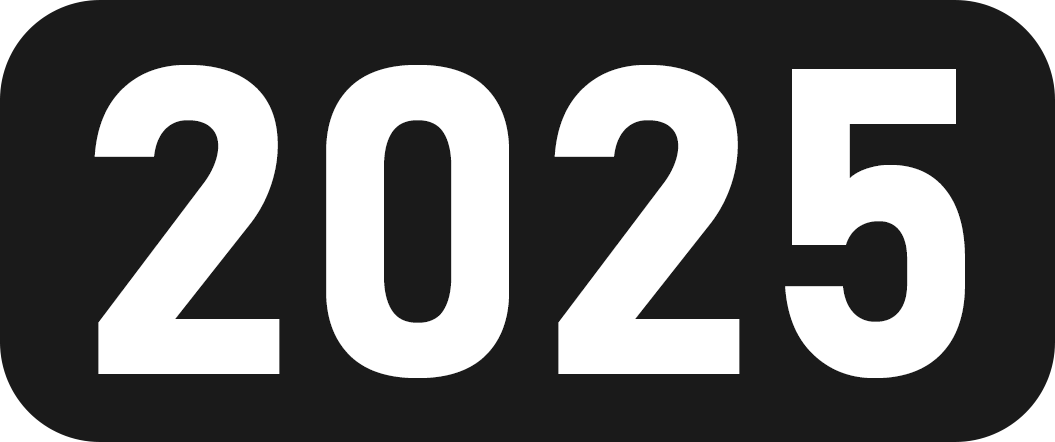
<style>
.page{position:relative;width:1055px;height:442px;background:#1a1a1a}
.page>*{position:absolute;margin:0}
.t1{font:429.9px "Bahnschrift-Bold";color:#ffffff}
</style>
<div class="page">
<p class="t1" style="left:94px;top:65px;width:871px;height:313px">2025</p>
</div>
